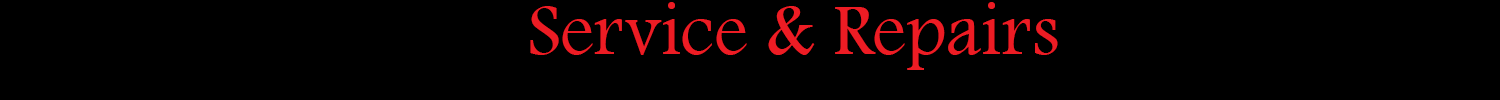
<style>
.page{position:relative;width:1500px;height:100px;background:#000000}
.page>*{position:absolute;margin:0}
.t1{font:75px "FootlightMTLight";color:#ed1c24}
</style>
<div class="page">
<p class="t1" style="left:530px;top:2px;width:528px;height:68px">Service &amp; Repairs</p>
</div>
